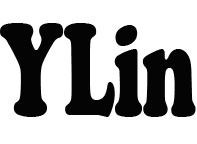
<style>
.page{position:relative;width:197px;height:144px;background:#ffffff}
.page>*{position:absolute;margin:0}
.t1{font:135px "CooperBlack";letter-spacing:-0.005em;color:#040404;scale:0.6 1}
</style>
<div class="page">
<p class="t1" style="left:0px;top:23px;width:196px;height:94px">YLin</p>
</div>
